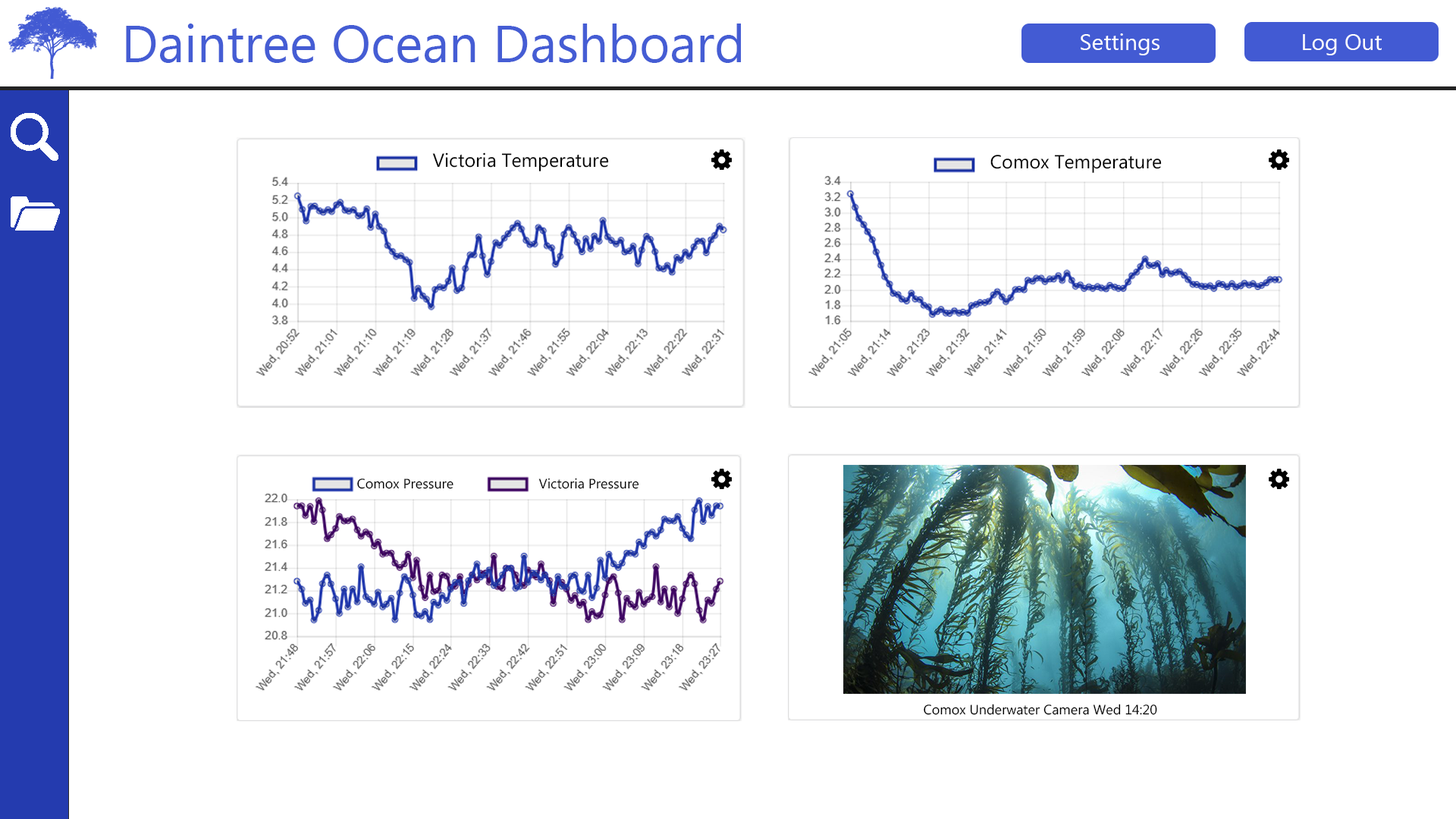
<style>
.page{position:relative;width:1456px;height:819px;background:#ffffff}
.page>*{position:absolute;margin:0}
.t1{font:52.3px "MyanmarText";color:#455dd4}
.t2{font:22.7px "MyanmarText";color:#ffffff}
.t3{font:19px "MyanmarText";color:#000000}
.t4{font:13.6px "MyanmarText";color:#000000}
</style>
<div class="page">
<p class="t1" style="left:126px;top:24px;width:615px;height:39px">Daintree Ocean Dashboard</p>
<p class="t2" style="left:1081px;top:33px;width:78px;height:22px">Settings</p>
<p class="t2" style="left:1303px;top:34px;width:79px;height:21px">Log Out</p>
<p class="t3" style="left:432px;top:152px;width:177px;height:19px">Victoria Temperature</p>
<p class="t3" style="left:990px;top:155px;width:172px;height:18px">Comox Temperature</p>
<p class="t4" style="left:357px;top:479px;width:96px;height:10px">Comox Pressure</p>
<p class="t4" style="left:538px;top:478px;width:101px;height:11px">Victoria Pressure</p>
<p class="t4" style="left:924px;top:704px;width:233px;height:11px">Comox Underwater Camera Wed 14:20</p>
</div>
